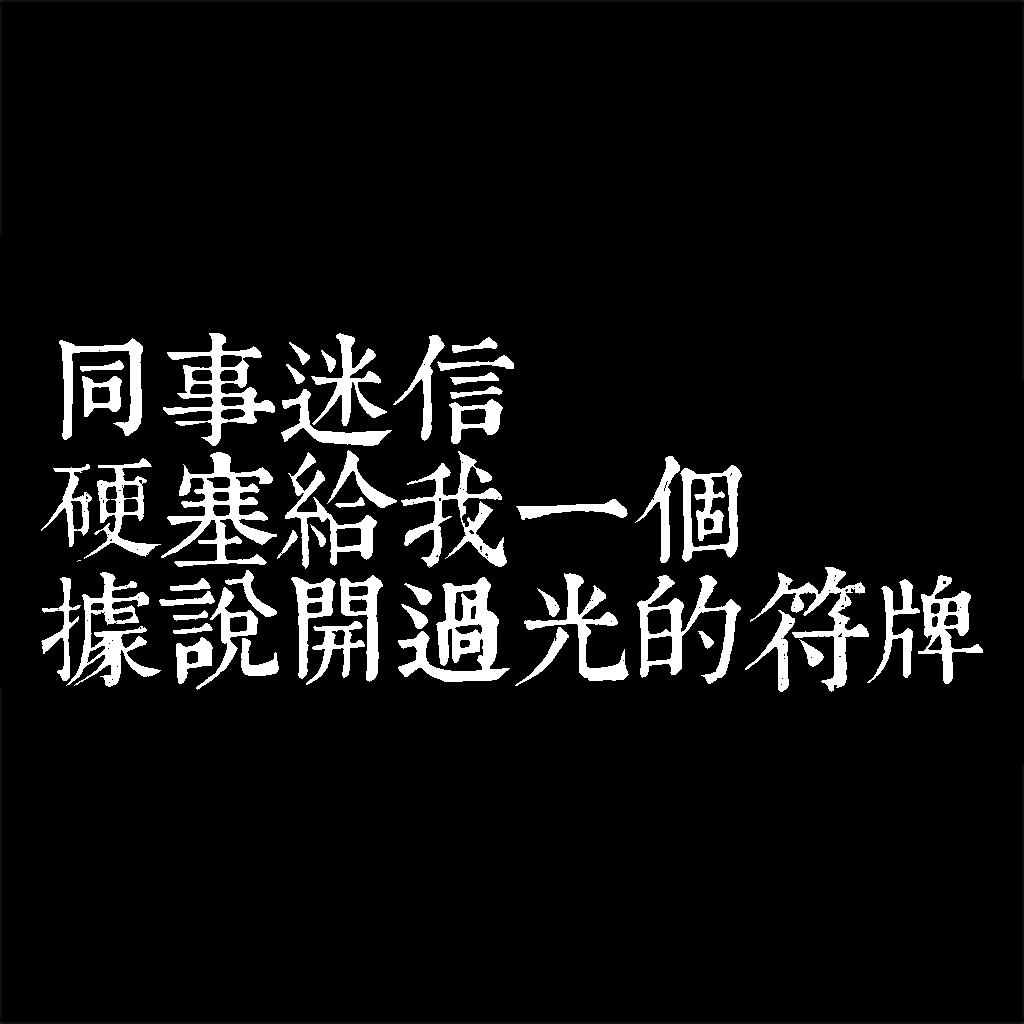
<style>
.page{position:relative;width:1024px;height:1024px;background:#000000}
.page>*{position:absolute;margin:0}
.t1{font:120px/120px "TpldKhangXiDictTrial";letter-spacing:-0.02em;color:#ffffff}
</style>
<div class="page">
<p class="t1" style="left:41px;top:333px;width:942px;height:359px">同事迷信<br>硬塞給我一個<br>據說開過光的符牌</p>
</div>
